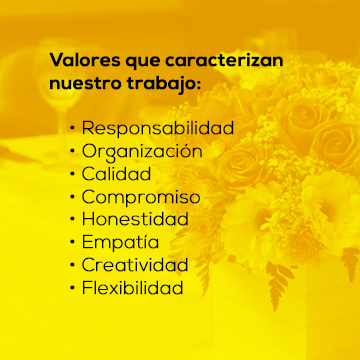
<style>
.page{position:relative;width:360px;height:360px}
.page>*{position:absolute;margin:0}
.t1{font:19px "NexaLight";color:#000000;font-weight:bold}
.t2{font:19px "NexaBold";color:#000000;font-weight:bold}
</style>
<div class="page">
<p class="t1" style="left:49px;top:52px;width:234px;height:243px"><span class="t2">Valores que caracterizan nuestro trabajo:<br><br></span>• Responsabilidad<br>• Organización<br>• Calidad<br>• Compromiso<br>• Honestidad<br>• Empatía<br>• Creatividad<br>• Flexibilidad</p>
</div>
